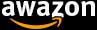
<style>
.page{position:relative;width:97px;height:30px;background:#000000}
.page>*{position:absolute;margin:0}
.t1{font:31px "OfficinaSansStd-Bold";color:#f9f9f9}
</style>
<div class="page">
<p class="t1" style="left:2px;top:1px;width:48px;height:15px">awa</p>
<p class="t1" style="left:65px;top:1px;width:30px;height:15px">on</p>
</div>
